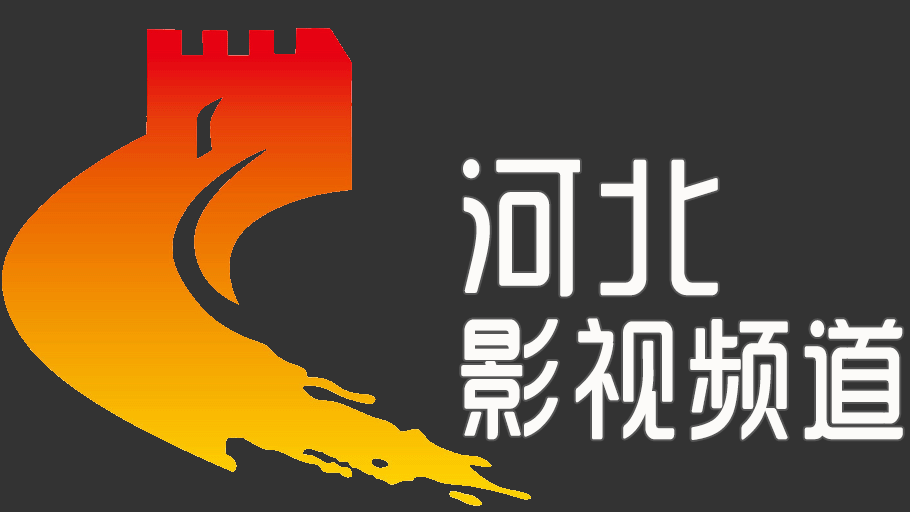
<style>
.page{position:relative;width:910px;height:512px;background:#333333}
.page>*{position:absolute;margin:0}
.t1{font:132px/160px "SJyunlvyuan";letter-spacing:0.02em;color:#fcfbf9;scale:0.85 1}
.t2{font:150px/160px "SJyunlvyuan";letter-spacing:0.02em;color:#fcfbf9;scale:0.9 1}
</style>
<div class="page">
<p class="t1" style="left:461px;top:159px;width:442px;height:281px"><span class="t2">河北<br></span>影视频道</p>
</div>
